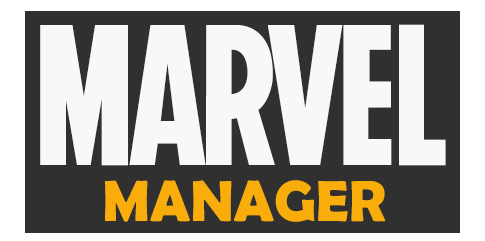
<style>
.page{position:relative;width:485px;height:241px;background:#303030}
.page>*{position:absolute;margin:0}
.t1{font:200px "Marvel-Regular";color:#f8f8f8}
.t2{font:58.3px "BerlinSansFBDemi-Bold";color:#f8ad0b}
</style>
<div class="page">
<p class="t1" style="left:40px;top:24px;width:406px;height:142px">MARVEL</p>
<p class="t2" style="left:105px;top:180px;width:281px;height:42px">MANAGER</p>
</div>
